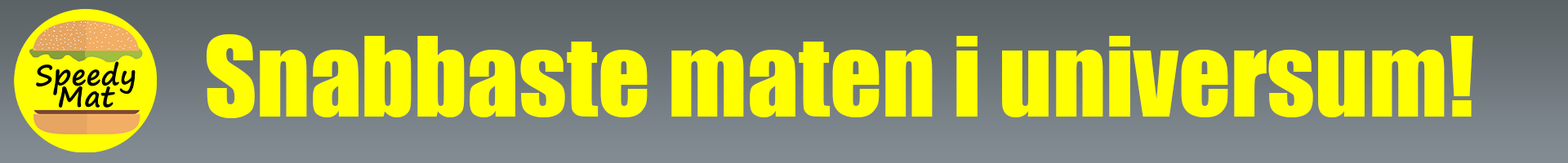
<style>
.page{position:relative;width:1568px;height:163px;background:#ffff00}
.page>*{position:absolute;margin:0}
.t1{font:102.1px "Impact";color:#ffff00}
</style>
<div class="page">
<p class="t1" style="left:206px;top:34px;width:1267px;height:84px">Snabbaste maten i universum!</p>
</div>
